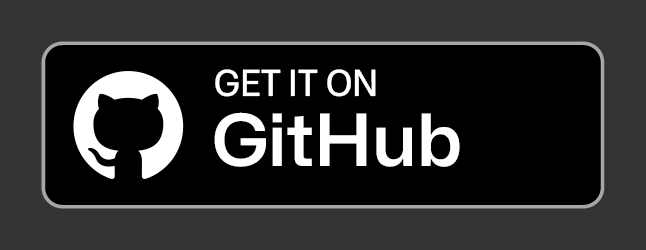
<style>
.page{position:relative;width:646px;height:250px;background:#000000}
.page>*{position:absolute;margin:0}
.t1{font:36px "MonaSans_95.000wdth_500.000wght";color:#ffffff}
.t2{font:72px "MonaSans-SemiBold";color:#ffffff}
</style>
<div class="page">
<p class="t1" style="left:215px;top:69px;width:161px;height:28px">GET IT ON</p>
<p class="t2" style="left:214px;top:112px;width:246px;height:55px">GitHub</p>
</div>
